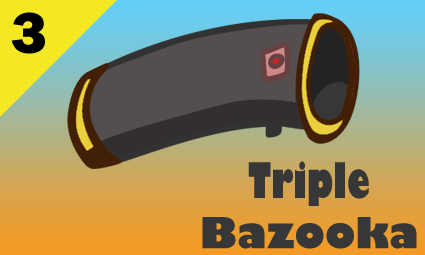
<style>
.page{position:relative;width:425px;height:255px}
.page>*{position:absolute;margin:0}
.t1{font:60px "FranklinGothic-Heavy";color:#000000}
.t2{font:42px "GillSans-UltraBold";color:#373737}
.t3{font:48px "GillSans-UltraBoldCondensed";color:#373737}
</style>
<div class="page">
<p class="t1" style="left:11px;top:12px;width:34px;height:42px">3</p>
<p class="t2" style="left:202px;top:161px;width:215px;height:88px;text-align:center"><span class="t3">Triple<br></span>Bazooka</p>
</div>
